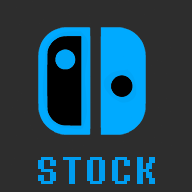
<style>
.page{position:relative;width:192px;height:192px;background:#2d2d2d}
.page>*{position:absolute;margin:0}
.t1{font:36px "BIG-SHOT";letter-spacing:0.02em;color:#009df0}
</style>
<div class="page">
<p class="t1" style="left:38px;top:157px;width:117px;height:27px">STOCK</p>
</div>
